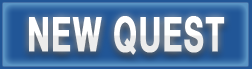
<style>
.page{position:relative;width:252px;height:69px}
.page>*{position:absolute;margin:0}
.t1{font:48px "HelveticaNeue-Bold";color:#ffffff;font-weight:bold;scale:0.64 1}
</style>
<div class="page">
<p class="t1" style="left:29px;top:16px;width:196px;height:39px">NEW QUEST</p>
</div>
